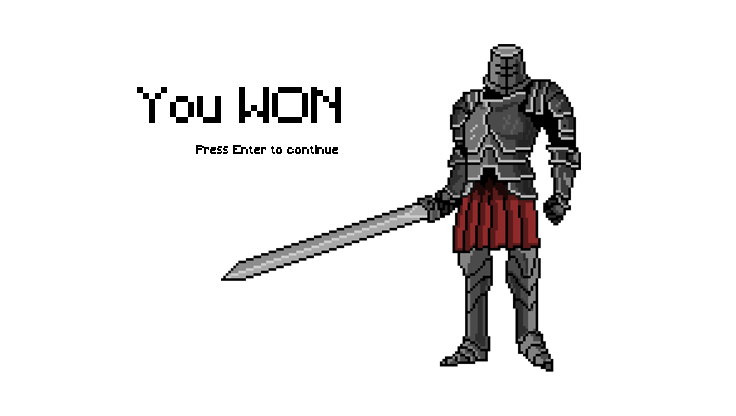
<style>
.page{position:relative;width:736px;height:416px;background:#ffffff}
.page>*{position:absolute;margin:0}
.t1{font:48px "Minecraft";color:#000000}
.t2{font:12px "Minecraft";color:#000000}
</style>
<div class="page">
<p class="t1" style="left:137px;top:87px;width:204px;height:36px">You WON</p>
<p class="t2" style="left:196px;top:145px;width:142px;height:9px">Press Enter to continue</p>
</div>
